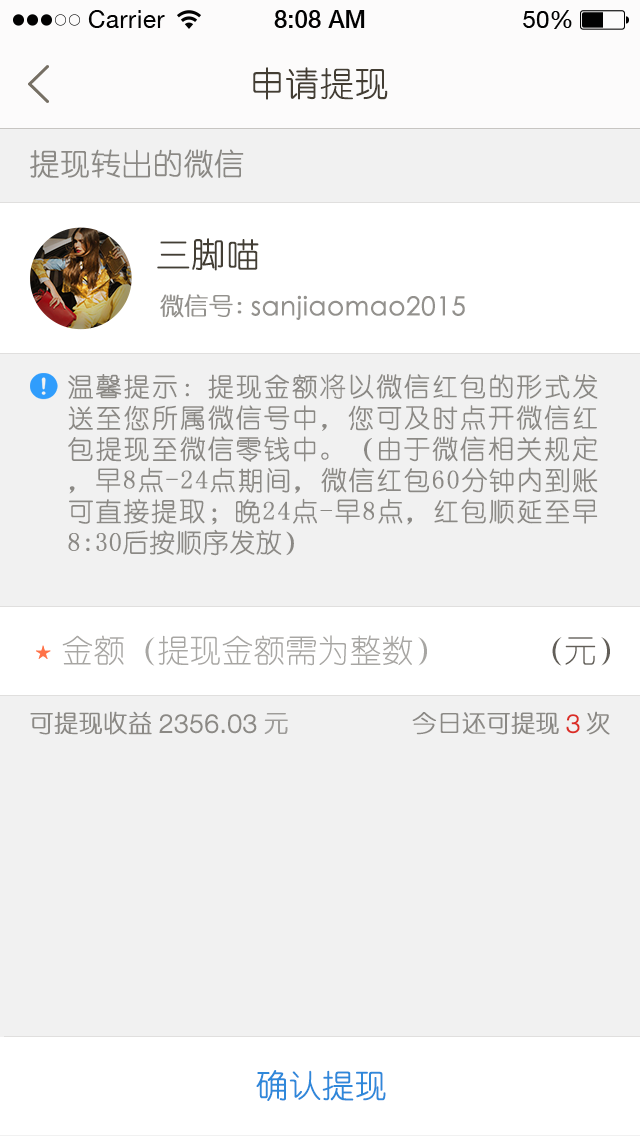
<style>
.page{position:relative;width:640px;height:1136px;background:#f1f1f1}
.page>*{position:absolute;margin:0}
.t1{font:34px "YouYuan";color:#433d33;text-transform:uppercase;font-weight:bold}
.t2{font:30px "YouYuan";color:#8b8985;text-transform:uppercase;font-weight:bold}
.t3{font:34px "YouYuan";color:#433e34;text-transform:uppercase;font-weight:bold}
.t4{font:24px "YouYuan";color:#93918d;text-transform:uppercase;font-weight:bold}
.t5{font:26px "STHeitiSC-Light";color:#93918d;font-weight:bold}
.t6{font:26px "STHeitiSC-Light";color:#93918d;text-transform:uppercase;font-weight:bold}
.t7{font:26px "YouYuan";color:#8b8985;text-transform:uppercase;font-weight:bold}
.t8{font:32px "YouYuan";color:#a7a6a3;text-transform:uppercase}
.t9{font:32px "YouYuan";color:#625e58;text-transform:uppercase}
.t10{font:24px "YouYuan";color:#8b8985;text-transform:uppercase;font-weight:bold}
.t11{font:24px "YouYuan";color:#9e9c99;text-transform:uppercase;font-weight:bold}
.t12{font:26px "HelveticaNeueLTPro-Lt";color:#8b8985;text-transform:uppercase;font-weight:bold}
.t13{font:26px "HelveticaNeueLTPro-Lt";color:#db2c25;text-transform:uppercase;font-weight:bold}
.t14{font:32px "YouYuan";color:#2f88da;text-transform:uppercase;font-weight:bold}
</style>
<div class="page">
<p class="t1" style="left:253px;top:67px;width:135px;height:33px">申请提现</p>
<p class="t2" style="left:30px;top:149px;width:214px;height:29px">提现转出的微信</p>
<p class="t3" style="left:157px;top:238px;width:102px;height:33px">三脚喵</p>
<p class="t4" style="left:160px;top:294px;width:82px;height:24px">微信号:</p>
<p class="t5" style="left:251px;top:295px;width:214px;height:25px">sanjiaomao<span class="t6">2015</span></p>
<p class="t7" style="left:68px;top:374px;width:530px;height:182px;text-align:justify">温馨提示：提现金额将以微信红包的形式发送至您所属微信号中，您可及时点开微信红包提现至微信零钱中。（由于微信相关规定，早8点-24点期间，微信红包60分钟内到账可直接提取；晚24点-早8点，红包顺延至早8:30后按顺序发放）</p>
<p class="t8" style="left:62px;top:635px;width:365px;height:31px">金额（提现金额需为整数）</p>
<p class="t9" style="left:552px;top:637px;width:58px;height:29px">（元）</p>
<p class="t10" style="left:30px;top:711px;width:122px;height:24px">可提现收益</p>
<p class="t11" style="left:264px;top:713px;width:24px;height:21px">元</p>
<p class="t10" style="left:412px;top:712px;width:147px;height:23px">今日还可提现</p>
<p class="t10" style="left:586px;top:711px;width:24px;height:24px">次</p>
<p class="t12" style="left:159px;top:714px;width:98px;height:20px">2356.03</p>
<p class="t13" style="left:566px;top:714px;width:14px;height:20px">3</p>
<p class="t14" style="left:256px;top:1070px;width:130px;height:31px">确认提现</p>
</div>
